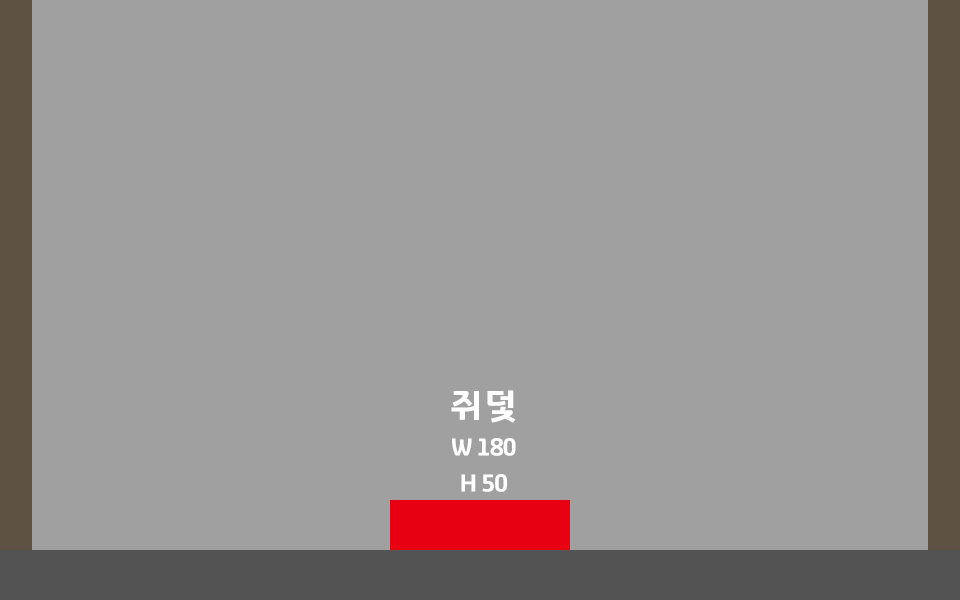
<style>
.page{position:relative;width:960px;height:600px;background:#a0a0a0}
.page>*{position:absolute;margin:0}
.t1{font:24px/36px "GyeonggiTitleV";letter-spacing:-0.05em;color:#ffffff}
.t2{font:36px/12px "GyeonggiTitleV";letter-spacing:-0.05em;color:#ffffff}
</style>
<div class="page">
<p class="t1" style="left:451px;top:390px;width:65px;height:102px;text-align:center"><span class="t2">쥐덫<br><br><br><br></span>W 180<br>H 50</p>
</div>
